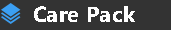
<style>
.page{position:relative;width:171px;height:30px;background:#333333}
.page>*{position:absolute;margin:0}
.t1{font:21.8px "SegoeUI-Bold";color:#ffffff}
</style>
<div class="page">
<p class="t1" style="left:34px;top:6px;width:101px;height:16px">Care Pack</p>
</div>
